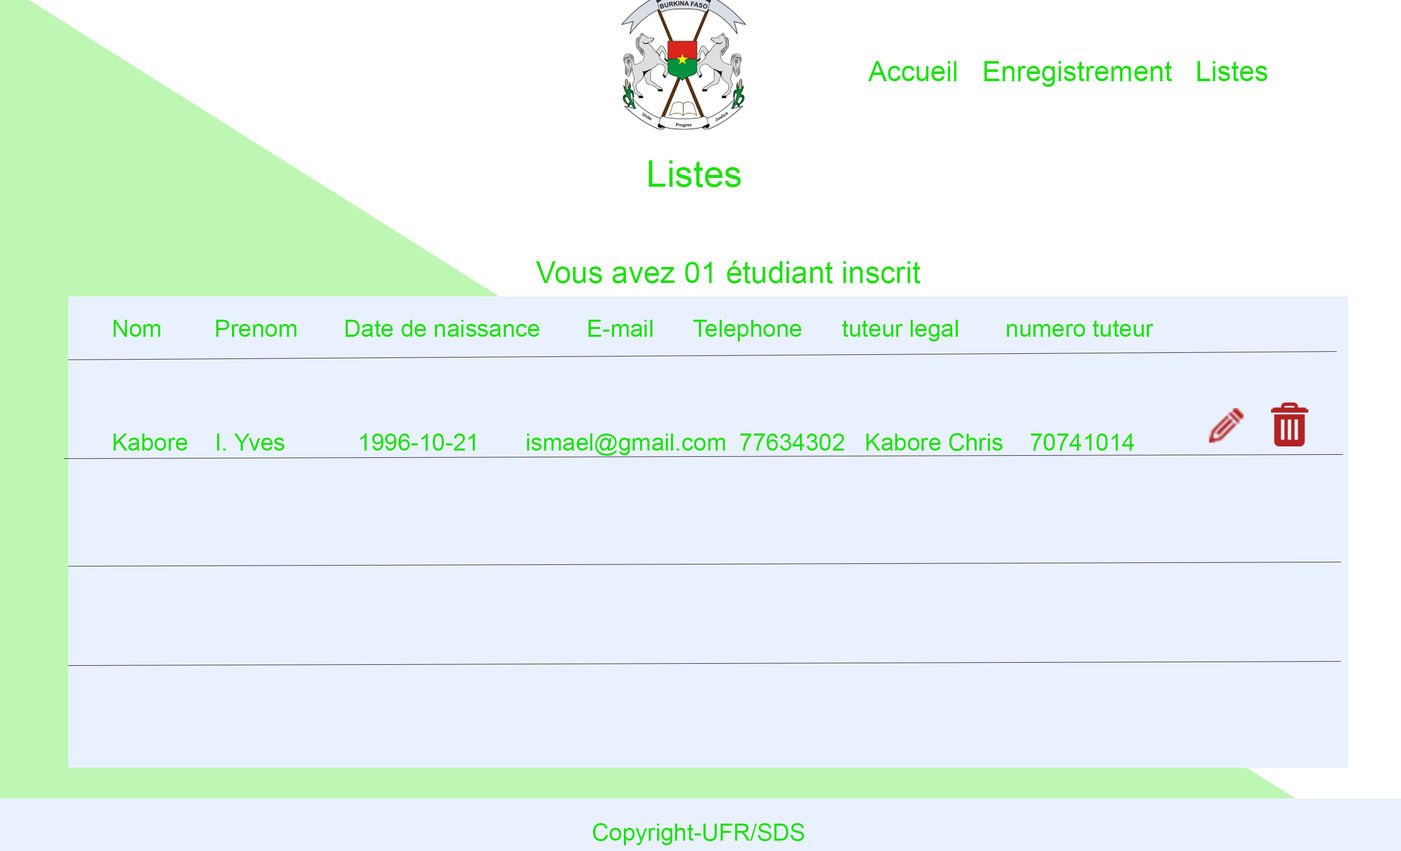
<style>
.page{position:relative;width:1401px;height:851px;background:#e9f1fe}
.page>*{position:absolute;margin:0}
.t1{font:28px "ArialMT";color:#1ee00f}
.t2{font:36.7px "ArialMT";color:#1ee00f}
.t3{font:30.2px "ArialMT";color:#1ee00f}
.t4{font:23.7px "ArialMT";color:#1ee00f}
</style>
<div class="page">
<p class="t1" style="left:867px;top:61px;width:400px;height:26px">Accueil   Enregistrement   Listes</p>
<p class="t2" style="left:649px;top:160px;width:92px;height:27px">Listes</p>
<p class="t3" style="left:536px;top:261px;width:384px;height:23px">Vous avez 01 étudiant inscrit</p>
<p class="t4" style="left:113px;top:320px;width:1040px;height:136px">Nom        Prenom       Date de naissance       E-mail      Telephone      tuteur legal       numero tuteur<br><br><br><br>Kabore    I. Yves           1996-10-21       ismael@gmail.com  77634302   Kabore Chris    70741014</p>
<p class="t4" style="left:593px;top:823px;width:211px;height:23px">Copyright-UFR/SDS</p>
</div>
